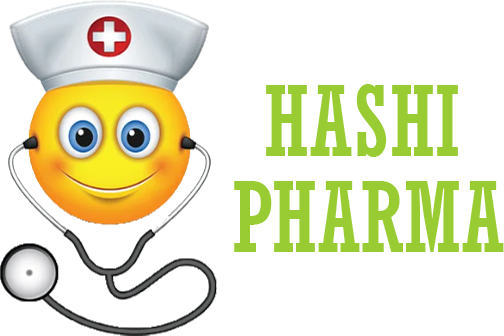
<style>
.page{position:relative;width:504px;height:336px;background:#ffffff}
.page>*{position:absolute;margin:0}
.t1{font:96px/24px "Rockwell-Condensed";color:#99cc33;text-transform:uppercase}
</style>
<div class="page">
<p class="t1" style="left:234px;top:84px;width:270px;height:168px">hASHI<br><br><br><br>pHARMA</p>
</div>
